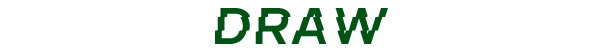
<style>
.page{position:relative;width:600px;height:50px;background:#ffffff}
.page>*{position:absolute;margin:0}
.t1{font:50px "DLSliftedDisplay";letter-spacing:0.04em;color:#005314;text-transform:uppercase;scale:1.1 1}
</style>
<div class="page">
<p class="t1" style="left:215px;top:8px;width:173px;height:36px">draw</p>
</div>
